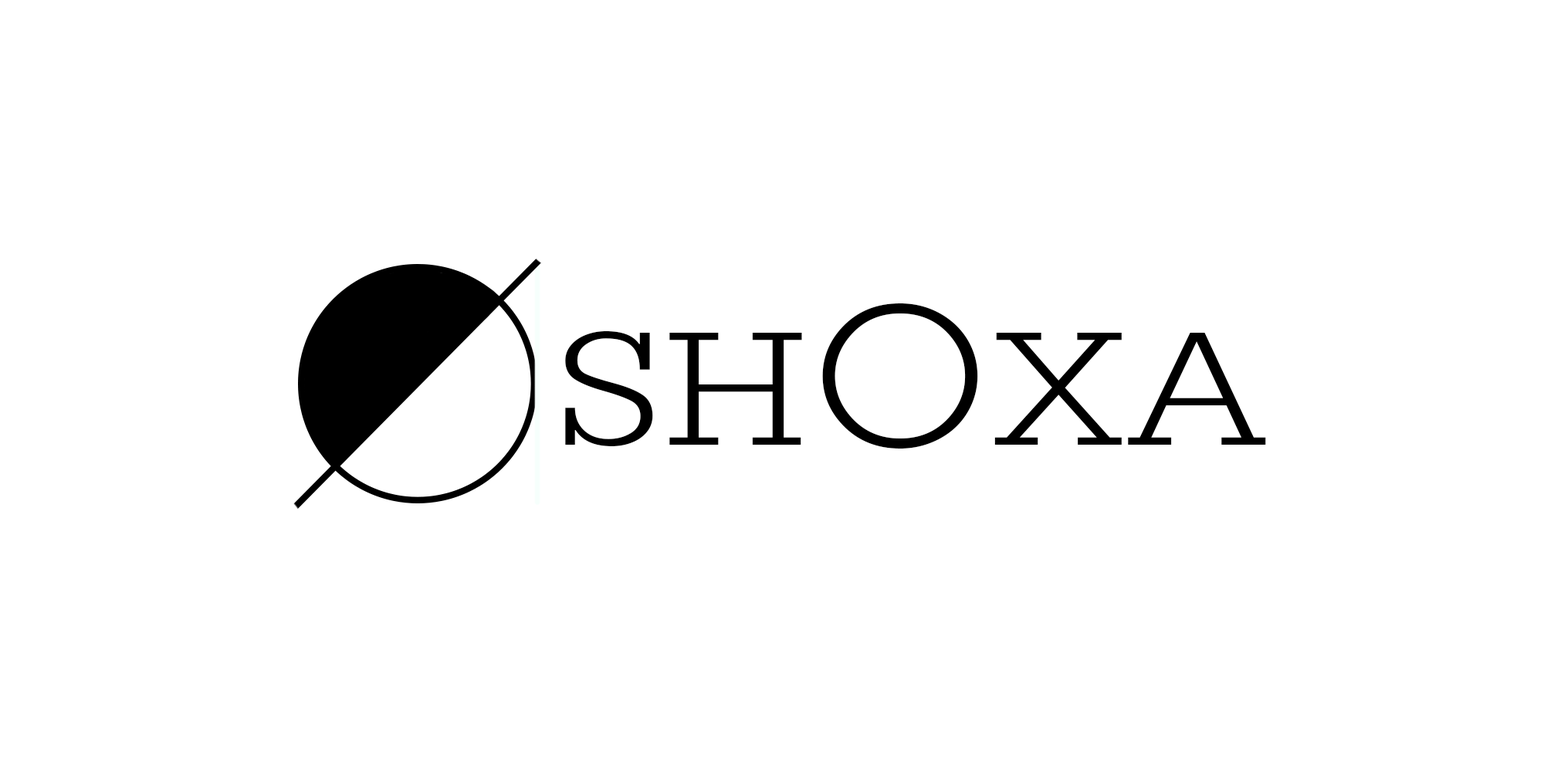
<style>
.page{position:relative;width:1544px;height:772px;background:#ffffff}
.page>*{position:absolute;margin:0}
.t1{font:241.3px "DilleniaUPC";color:#000000;scale:1.28 1}
.t2{font:241.3px "Rod";color:#000000;scale:1.28 1}
</style>
<div class="page">
<p class="t1" style="left:565px;top:303px;width:701px;height:146px">SH<span class="t2">O</span>XA</p>
</div>
